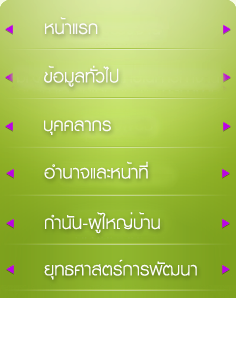
<style>
.page{position:relative;width:236px;height:350px}
.page>*{position:absolute;margin:0}
.t1{font:26px "KittithadaLight45F";color:#fcfcfb}
</style>
<div class="page">
<p class="t1" style="left:45px;top:17px;width:53px;height:18px">หน้าแรก</p>
<p class="t1" style="left:44px;top:65px;width:75px;height:22px">ข้อมูลทั่วไป</p>
<p class="t1" style="left:44px;top:120px;width:67px;height:15px">บุคคลากร</p>
<p class="t1" style="left:44px;top:161px;width:104px;height:18px">อำนาจและหน้าที่</p>
<p class="t1" style="left:45px;top:212px;width:115px;height:22px">กำนัน-ผู้ใหญ่บ้าน</p>
<p class="t1" style="left:44px;top:259px;width:153px;height:21px">ยุทธศาสตร์การพัฒนา</p>
</div>
